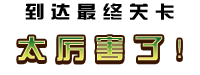
<style>
.page{position:relative;width:200px;height:75px;background:#ffffff}
.page>*{position:absolute;margin:0}
.t1{font:18px "JZhongYi";letter-spacing:0.3em;color:#000000;scale:1.11 1}
.t2{font:27px "JZhongYi";letter-spacing:0.3em;scale:1.11 1}
</style>
<div class="page">
<p class="t1" style="left:25px;top:3px;width:149px;height:17px">到达最终关卡</p>
<p class="t2" style="left:18px;top:38px;width:163px;height:25px">太厉害了！</p>
</div>
